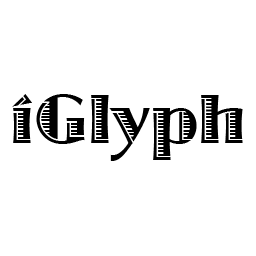
<style>
.page{position:relative;width:256px;height:256px;background:#ffffff}
.page>*{position:absolute;margin:0}
.t1{font:72px "JazzLetPlain";color:#000000}
</style>
<div class="page">
<p class="t1" style="left:12px;top:94px;width:231px;height:67px">iGlyph</p>
</div>
